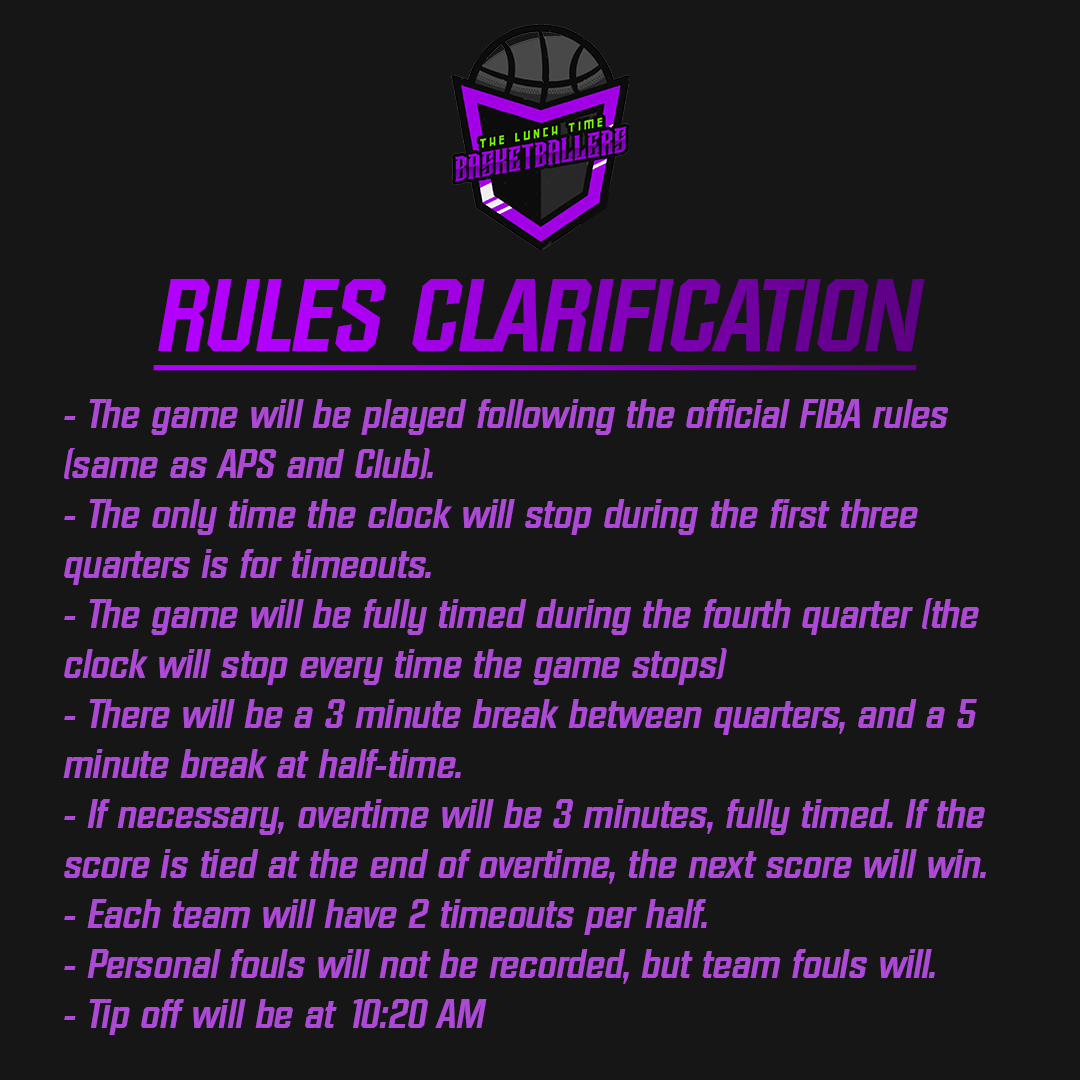
<style>
.page{position:relative;width:1080px;height:1080px;background:#161616}
.page>*{position:absolute;margin:0}
.t1{font:100px "Diamante-Serial-BoldItalic";text-decoration:underline}
.t2{font:40px/50px "Diamante-Serial-BoldItalic";color:#ac4ad5}
</style>
<div class="page">
<p class="t1" style="left:153px;top:279px;width:772px;height:92px">RULES CLARIFICATION</p>
<p class="t2" style="left:63px;top:399px;width:923px;height:636px">- The game will be played following the official FIBA rules (same as APS and Club).<br>- The only time the clock will stop during the first three quarters is for timeouts.<br>- The game will be fully timed during the fourth quarter (the clock will stop every time the game stops)<br>- There will be a 3 minute break between quarters, and a 5 minute break at half-time.<br>- If necessary, overtime will be 3 minutes, fully timed. If the score is tied at the end of overtime, the next score will win.<br>- Each team will have 2 timeouts per half.<br>- Personal fouls will not be recorded, but team fouls will.<br>- Tip off will be at 10:20 AM</p>
</div>
